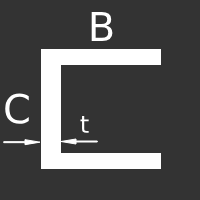
<style>
.page{position:relative;width:200px;height:200px;background:#333333}
.page>*{position:absolute;margin:0}
.t1{font:40px "DejaVuSans";color:#ffffff}
.t2{font:24px "DejaVuSans";color:#ffffff}
</style>
<div class="page">
<p class="t1" style="left:91px;top:11px;width:22px;height:31px">B</p>
<p class="t1" style="left:5px;top:93px;width:24px;height:31px">C</p>
<p class="t2" style="left:80px;top:115px;width:9px;height:18px">t</p>
</div>
